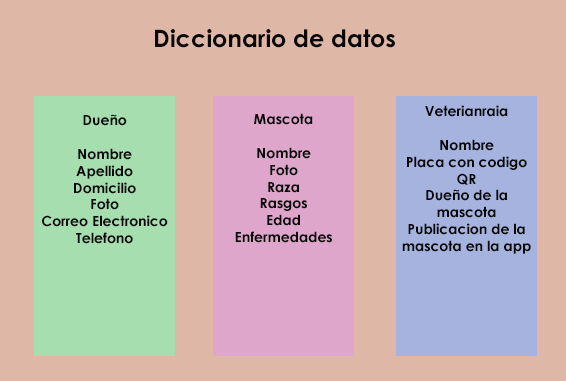
<style>
.page{position:relative;width:566px;height:381px;background:#deb7a6}
.page>*{position:absolute;margin:0}
.t1{font:24px "CenturyGothic-Bold";color:#080808}
.t2{font:14px "CenturyGothic-Bold";color:#080808}
</style>
<div class="page">
<p class="t1" style="left:155px;top:29px;width:240px;height:19px">Diccionario de datos</p>
<p class="t2" style="left:235px;top:113px;width:97px;height:130px;text-align:center">Mascota<br><br>Nombre<br>Foto<br>Raza<br>Rasgos<br>Edad<br>Enfermedades</p>
<p class="t2" style="left:402px;top:105px;width:129px;height:149px;text-align:center">Veterianraia<br><br>Nombre<br>Placa con codigo QR<br>Dueño de la mascota<br>Publicacion de la mascota en la app</p>
<p class="t2" style="left:42px;top:114px;width:126px;height:130px;text-align:center">Dueño<br><br>Nombre<br>Apellido<br>Domicilio<br>Foto<br>Correo Electronico<br>Telefono</p>
</div>
